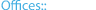
<style>
.page{position:relative;width:96px;height:10px;background:#ffffff}
.page>*{position:absolute;margin:0}
.t1{font:14px "MyriadPro-Regular";color:#42aee1}
</style>
<div class="page">
<p class="t1" style="left:1px;top:0px;width:46px;height:11px">Offices::</p>
</div>
